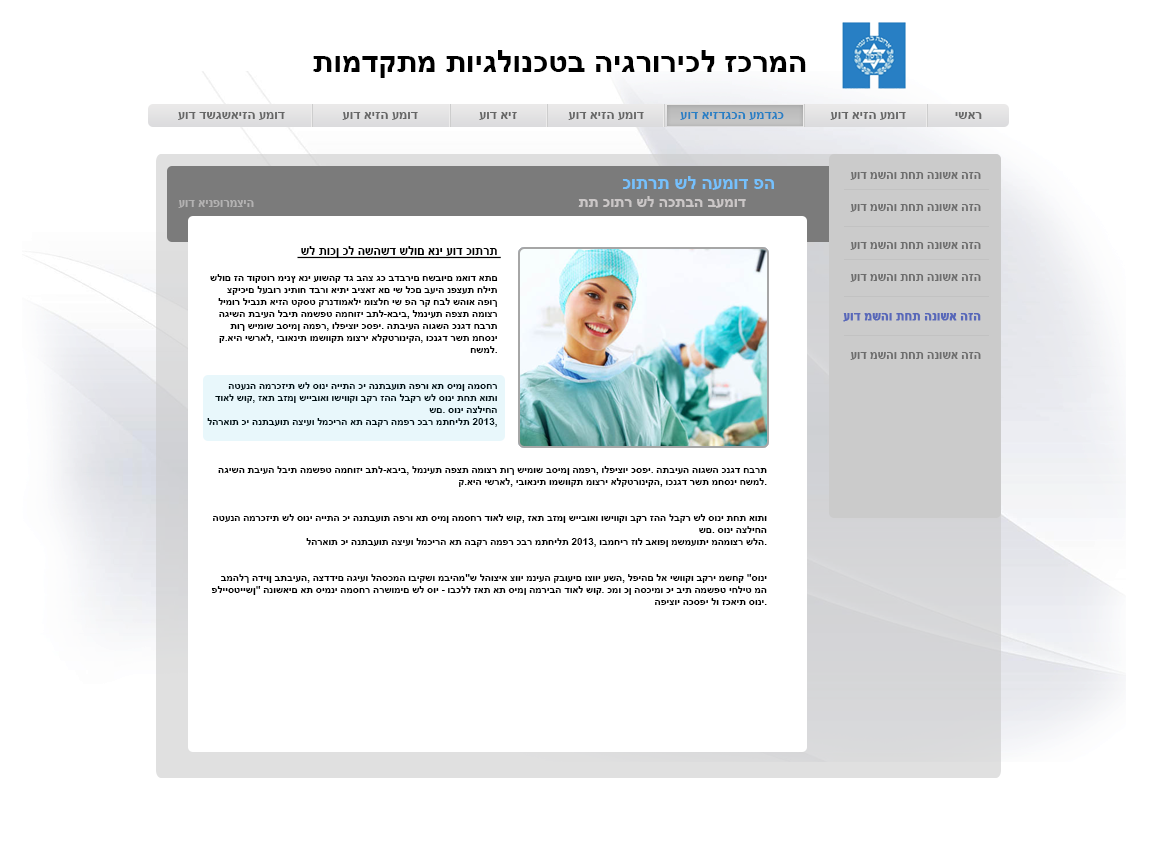
<style>
.page{position:relative;width:1152px;height:864px;background:#ffffff}
.page>*{position:absolute;margin:0}
.t1{font:31px "Arial-BoldMT";color:#000000}
.t2{font:13px "Arial-BoldMT";color:#666666}
.t3{font:13px "Arial-BoldMT";color:#287fc4}
.t4{font:12px "Arial-BoldMT";color:#6d6d6d}
.t5{font:18px "Arial-BoldMT";color:#75c0fc}
.t6{font:15px "Arial-BoldMT";color:#cac6c6}
.t7{font:12px "Arial-BoldMT";color:#b3b2b2}
.t8{font:12px "Arial-BoldMT";color:#000000;text-decoration:underline}
.t9{font:10px "Arial-BoldMT";color:#000000}
.t10{font:12px "Arial-BoldMT";color:#5868b9;font-weight:bold}
</style>
<div class="page">
<p class="t1" style="left:313px;top:50px;width:493px;height:28px">תומדקתמ תויגלונכטב היגרוריכל זכרמה</p>
<p class="t2" style="left:178px;top:112px;width:107px;height:8px">עוד דשגשאיזה עמוד</p>
<p class="t2" style="left:342px;top:112px;width:76px;height:8px">עוד איזה עמוד</p>
<p class="t2" style="left:479px;top:112px;width:38px;height:8px">עוד איז</p>
<p class="t2" style="left:568px;top:112px;width:76px;height:8px">עוד איזה עמוד</p>
<p class="t3" style="left:680px;top:112px;width:104px;height:8px">עוד איזדגכה עמדגכ</p>
<p class="t2" style="left:830px;top:112px;width:76px;height:8px">עוד איזה עמוד</p>
<p class="t2" style="left:955px;top:112px;width:27px;height:7px">ישאר</p>
<p class="t4" style="left:850px;top:172px;width:131px;height:8px">עוד משהו תחת הנושא הזה</p>
<p class="t5" style="left:622px;top:176px;width:152px;height:14px">כותרת של העמוד פה</p>
<p class="t6" style="left:578px;top:196px;width:168px;height:12px">תת כותר של הכתבה בעמוד</p>
<p class="t7" style="left:178px;top:200px;width:76px;height:8px">עוד אינפורמציה</p>
<p class="t4" style="left:850px;top:204px;width:131px;height:8px">עוד משהו תחת הנושא הזה</p>
<p class="t8" style="left:297px;top:246px;width:204px;height:13px">של תוכן כל השהשד שלום אני עוד כותרת</p>
<p class="t4" style="left:850px;top:242px;width:131px;height:8px">עוד משהו תחת הנושא הזה</p>
<p class="t9" style="left:207px;top:274px;width:291px;height:153px;text-align:right">שלום זה דוקטור מינץ אני עושהק דג בהצ גכ בדברים חשבוים מאוד אתם צקיכים לעבור ניתוח דברו איתי ביצאז אם יש לכם בעיה נפצעת חלית לימור ליבנת איזה טקסט קרנדומאלי מוצלח יש פה רק חבל שהוא הפוך  הגישה תביעה לבית המשפט המחוזי בתל-אביב, למניעת הפצת המוצר תוך שימוש בסימן המפר, ולפיצוי כספי. התביעה הוגשה כנגד חברת ק.איה ישראל, יבואנית ומשווקת מוצרי אלקטרוניקה, וכנגד רשת מחסני חשמל.<br><br> <br>הטענה המרכזית של סוני הייתה כי הנתבעות הפרו את סימן המסחר דואל שוק, זאת בזמן שייבואו ושיווקו בקר זהה לבקר של סוני תחת אותו שם. סוני הצליחה<br>להראות כי הנתבעות הציעו למכירה את הבקר המפר כבר מתחילת 2013, ובמחיר זול באופן משמעותי מהמוצר שלה.<br><br> <br>במהלך הדיון בתביעה, הצדדים הגיעו להסכמה וביקשו מביהמ"ש להוציא צווי מניעה קבועים וצווי עשה, לפיהם לא ישווקו בקרי משחק "סוני פלייסטיישן" הנושאים את סימני המסחר הרשומים של סוי - ובכלל זאת את סימן המריבה דואל שוק. כמו כן הסכימו כי בית המשפט יחליט מה הפיצוי הכספי לו זכאית סוני.<br><br> <br><br>השופט הבכיר גדעון גינת, חייב את ק. איה ישראל ומחסני חשמל בתשלום פיצוי של 50 אלף שקל, בתוספת הוצאות עו"ד בסכום של 14 אלף שקל, וכן החזר הוצאות אגרה והוצאות משפט. זאת, לאחר שקבע כי מדובר בהפרה בוטה של סימני מסחר רשומים - במטרה לנצל את הסימן הרשום של סוני לשיווק מוצר מתחרה.וזה</p>
<p class="t4" style="left:850px;top:274px;width:131px;height:8px">עוד משהו תחת הנושא הזה</p>
<p class="t10" style="left:843px;top:313px;width:138px;height:9px">עוד משהו תחת הנושא הזה</p>
<p class="t4" style="left:850px;top:352px;width:131px;height:8px">עוד משהו תחת הנושא הזה</p>
<p class="t9" style="left:211px;top:466px;width:556px;height:139px;text-align:right">הגישה תביעה לבית המשפט המחוזי בתל-אביב, למניעת הפצת המוצר תוך שימוש בסימן המפר, ולפיצוי כספי. התביעה הוגשה כנגד חברת ק.איה ישראל, יבואנית ומשווקת מוצרי אלקטרוניקה, וכנגד רשת מחסני חשמל.<br><br> <br>הטענה המרכזית של סוני הייתה כי הנתבעות הפרו את סימן המסחר דואל שוק, זאת בזמן שייבואו ושיווקו בקר זהה לבקר של סוני תחת אותו שם. סוני הצליחה<br>להראות כי הנתבעות הציעו למכירה את הבקר המפר כבר מתחילת 2013, ובמחיר זול באופן משמעותי מהמוצר שלה.<br><br> <br>במהלך הדיון בתביעה, הצדדים הגיעו להסכמה וביקשו מביהמ"ש להוציא צווי מניעה קבועים וצווי עשה, לפיהם לא ישווקו בקרי משחק "סוני פלייסטיישן" הנושאים את סימני המסחר הרשומים של סוי - ובכלל זאת את סימן המריבה דואל שוק. כמו כן הסכימו כי בית המשפט יחליט מה הפיצוי הכספי לו זכאית סוני.<br><br> <br><br>השופט הבכיר גדעון גינת, חייב את ק. איה ישראל ומחסני חשמל בתשלום פיצוי של 50 אלף שקל, בתוספת הוצאות עו"ד בסכום של 14 אלף שקל, וכן החזר הוצאות אגרה והוצאות משפט. זאת, לאחר שקבע כי מדובר בהפרה בוטה של סימני מסחר רשומים - במטרה לנצל את הסימן הרשום של סוני לשיווק מוצר מתחרה.</p>
</div>
